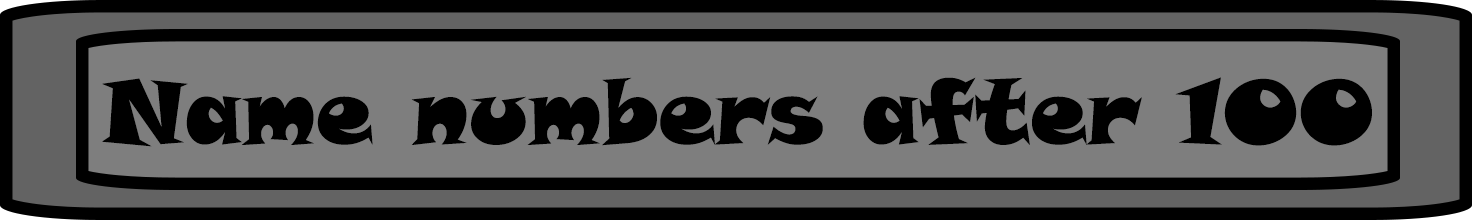
<style>
.page{position:relative;width:1472px;height:220px;background:#7e7e7e}
.page>*{position:absolute;margin:0}
.t1{font:90px "SnapITC-Regular";color:#000000}
</style>
<div class="page">
<p class="t1" style="left:102px;top:77px;width:1270px;height:70px">Name numbers after 100</p>
</div>
